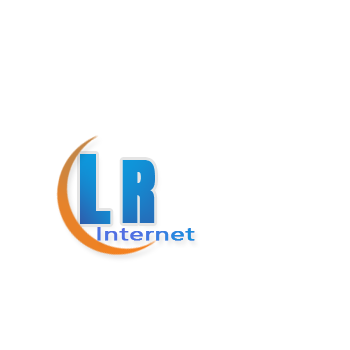
<style>
.page{position:relative;width:350px;height:350px;background:#ffffff}
.page>*{position:absolute;margin:0}
.t1{font:80px "Anton-Regular";color:#1983cb;font-weight:bold}
.t2{font:72px "Anton-Regular";color:#1885cc;font-weight:bold}
.t3{font:17.8px "NirmalaUI";font-weight:bold;scale:1.53 1}
</style>
<div class="page">
<p class="t1" style="left:80px;top:154px;width:31px;height:70px">L</p>
<p class="t2" style="left:122px;top:160px;width:33px;height:63px">R</p>
<p class="t3" style="left:97px;top:227px;width:98px;height:14px">Internet</p>
</div>
